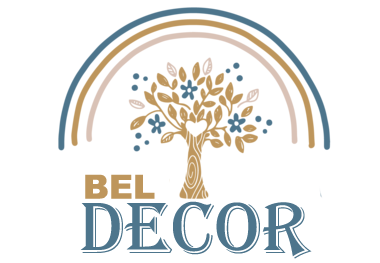
<style>
.page{position:relative;width:380px;height:263px;background:#ffffff}
.page>*{position:absolute;margin:0}
.t1{font:33.3px "Arial-Black";color:#be965c}
.t2{font:75px "Algerian";color:#4d758c}
</style>
<div class="page">
<p class="t1" style="left:85px;top:174px;width:70px;height:25px">BEL</p>
<p class="t2" style="left:80px;top:201px;width:232px;height:58px">decor</p>
</div>
